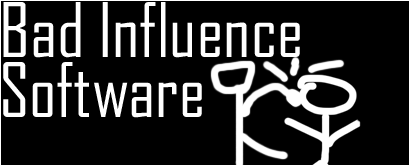
<style>
.page{position:relative;width:410px;height:166px;background:#000000}
.page>*{position:absolute;margin:0}
.t1{font:72px/60px "AgencyFB-Reg";color:#ffffff}
</style>
<div class="page">
<p class="t1" style="left:3px;top:2px;width:297px;height:116px">Bad Influence<br>Software</p>
</div>
